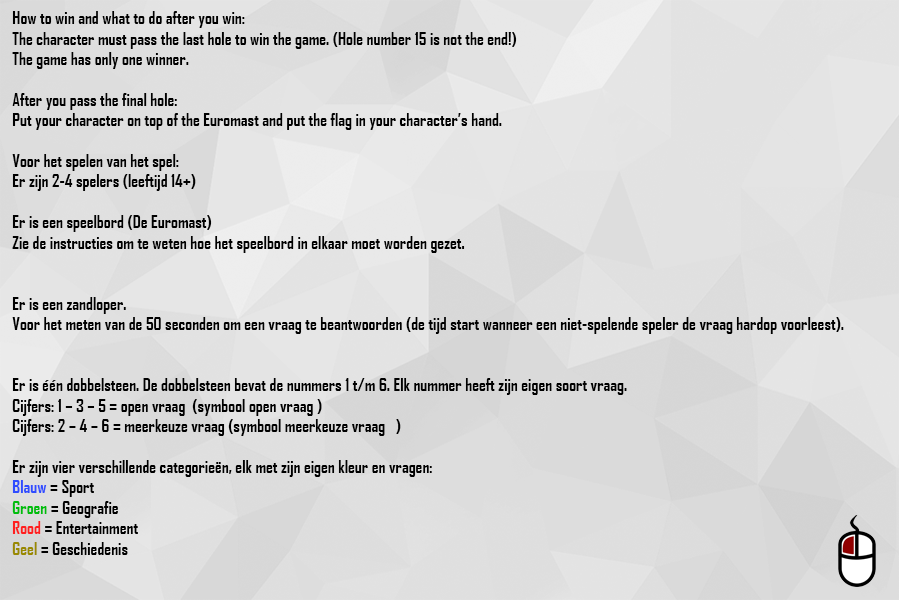
<style>
.page{position:relative;width:900px;height:600px}
.page>*{position:absolute;margin:0}
.t1{font:17px "AgencyFB-Bold";color:#000000}
.t2{font:17px "AgencyFB-Bold";color:#304dff}
.t3{font:17px "AgencyFB-Bold";color:#00bd0d}
.t4{font:17px "AgencyFB-Bold";color:#ff1f1f}
.t5{font:17px "AgencyFB-Bold";color:#998900}
</style>
<div class="page">
<p class="t1" style="left:12px;top:11px;width:832px;height:544px">How to win and what to do after you win:<br>The character must pass the last hole to win the game. (Hole number 15 is not the end!)<br>The game has only one winner.<br><br>After you pass the final hole:<br>Put your character on top of the Euromast and put the flag in your character’s hand. <br><br>Voor het spelen van het spel:<br>Er zijn 2-4 spelers (leeftijd 14+)<br><br>Er is een speelbord (De Euromast)<br>Zie de instructies om te weten hoe het speelbord in elkaar moet worden gezet.<br><br><br>Er is een zandloper.<br>Voor het meten van de 50 seconden om een vraag te beantwoorden (de tijd start wanneer een niet-spelende speler de vraag hardop voorleest). <br><br><br>Er is één dobbelsteen. De dobbelsteen bevat de nummers 1 t/m 6. Elk nummer heeft zijn eigen soort vraag.<br>Cijfers: 1 – 3 – 5 = open vraag  (symbool open vraag )<br>Cijfers: 2 – 4 – 6 = meerkeuze vraag (symbool meerkeuze vraag   )<br><br>Er zijn vier verschillende categorieën, elk met zijn eigen kleur en vragen:<br><span class="t2">Blauw</span> = Sport<br><span class="t3">Groen</span> = Geografie<br><span class="t4">Rood</span> = Entertainment<br><span class="t5">Geel </span>= Geschiedenis<br><br>Elke speler kiest zijn poppetje.<br><br><br>Elke speler rolt de dobbelsteen, de speler met het hoogste cijfer kiest als eerste zijn/haar categorie. <br>Wanneer twee of meer spelers het hoogste cijfer gooien, zullen deze spelers de dobbelsteen nogmaals gooien totdat één van die spelers het hoogste cijfer gooit.<br><br>De rest van de spelers kiezen een categorie van de overgebleven categorieën (er is maar 1 speler per categorie mogelijk aan het begin van het spel).<br><br><br>De speler wie het hoogste cijfer heeft gegooid, zal als eerste beginnen met zijn/haar beurt. Nadat deze speler klaar is met zijn/haar beurt, vervolgt het spel zich met de klok mee. <br><br>Spelers plaatsen hun poppetjes op het houten deel van het speelbord en voor de gekozen categorie.<br>Plaats het poppetje niet in het eerst gaatje.</p>
</div>
